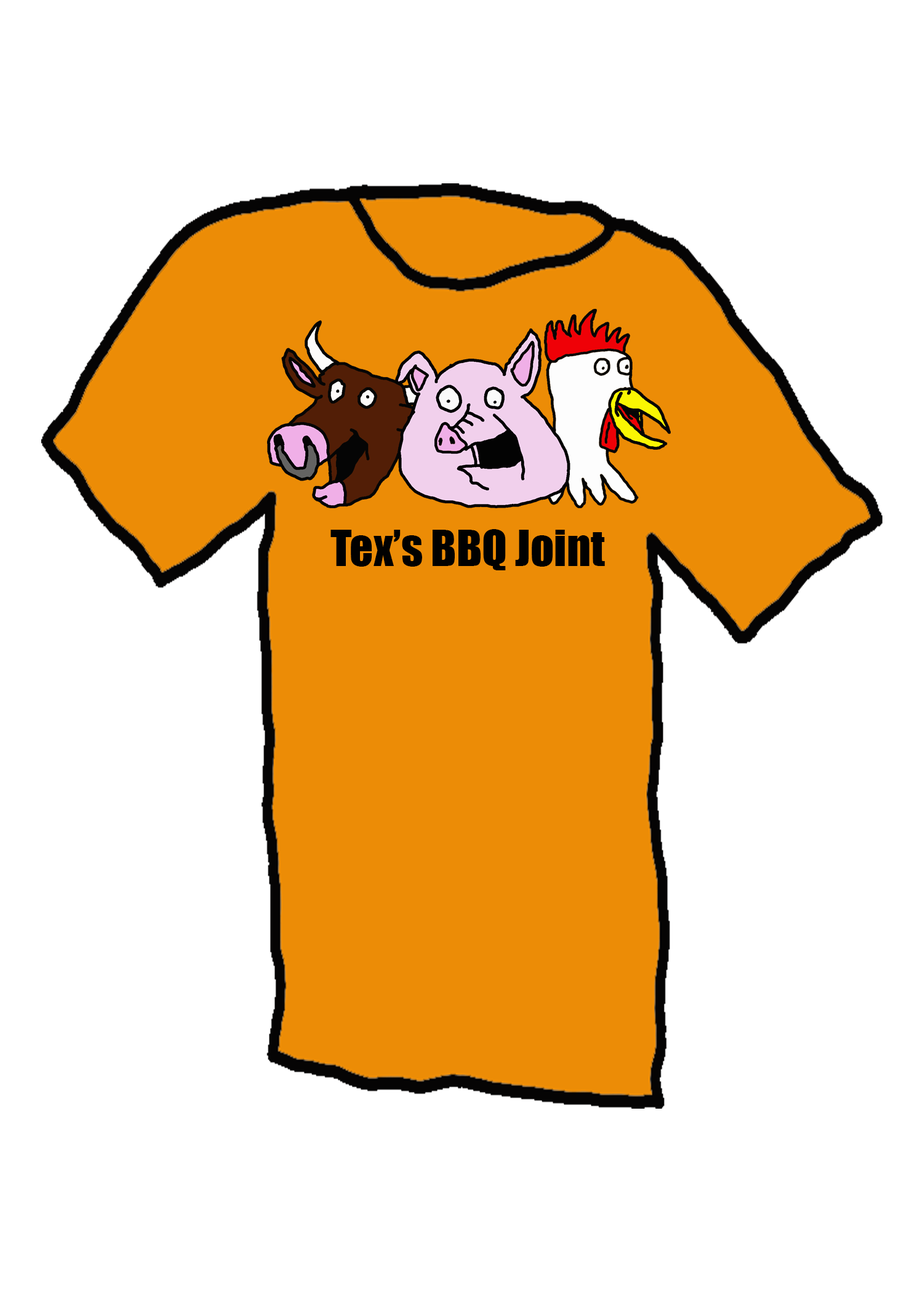
<style>
.page{position:relative;width:923px;height:1292px;background:#ffffff}
.page>*{position:absolute;margin:0}
.t1{font:46.1px "Impact";color:#010101}
</style>
<div class="page">
<p class="t1" style="left:330px;top:529px;width:275px;height:41px">Tex’s BBQ Joint</p>
</div>
